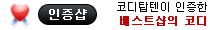
<style>
.page{position:relative;width:210px;height:30px;background:#ffffff}
.page>*{position:absolute;margin:0}
.t1{font:11px/14px "Dotum";color:#000000}
.t2{font:11px/14px "Dotum";color:#c20000;font-weight:bold}
.t3{font:12px "Dotum";color:#ffffff;font-weight:bold}
</style>
<div class="page">
<p class="t1" style="left:117px;top:2px;width:90px;height:24px;text-align:right">코디탑텐이 인증한<br><span class="t2">베스트샵의 코디</span></p>
<p class="t3" style="left:49px;top:9px;width:38px;height:11px">인증샵</p>
</div>
